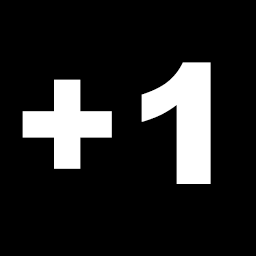
<style>
.page{position:relative;width:256px;height:256px;background:#000000}
.page>*{position:absolute;margin:0}
.t1{font:167px "Arial-Black";letter-spacing:0.034em;color:#ffffff}
</style>
<div class="page">
<p class="t1" style="left:22px;top:62px;width:189px;height:122px">+1</p>
</div>
